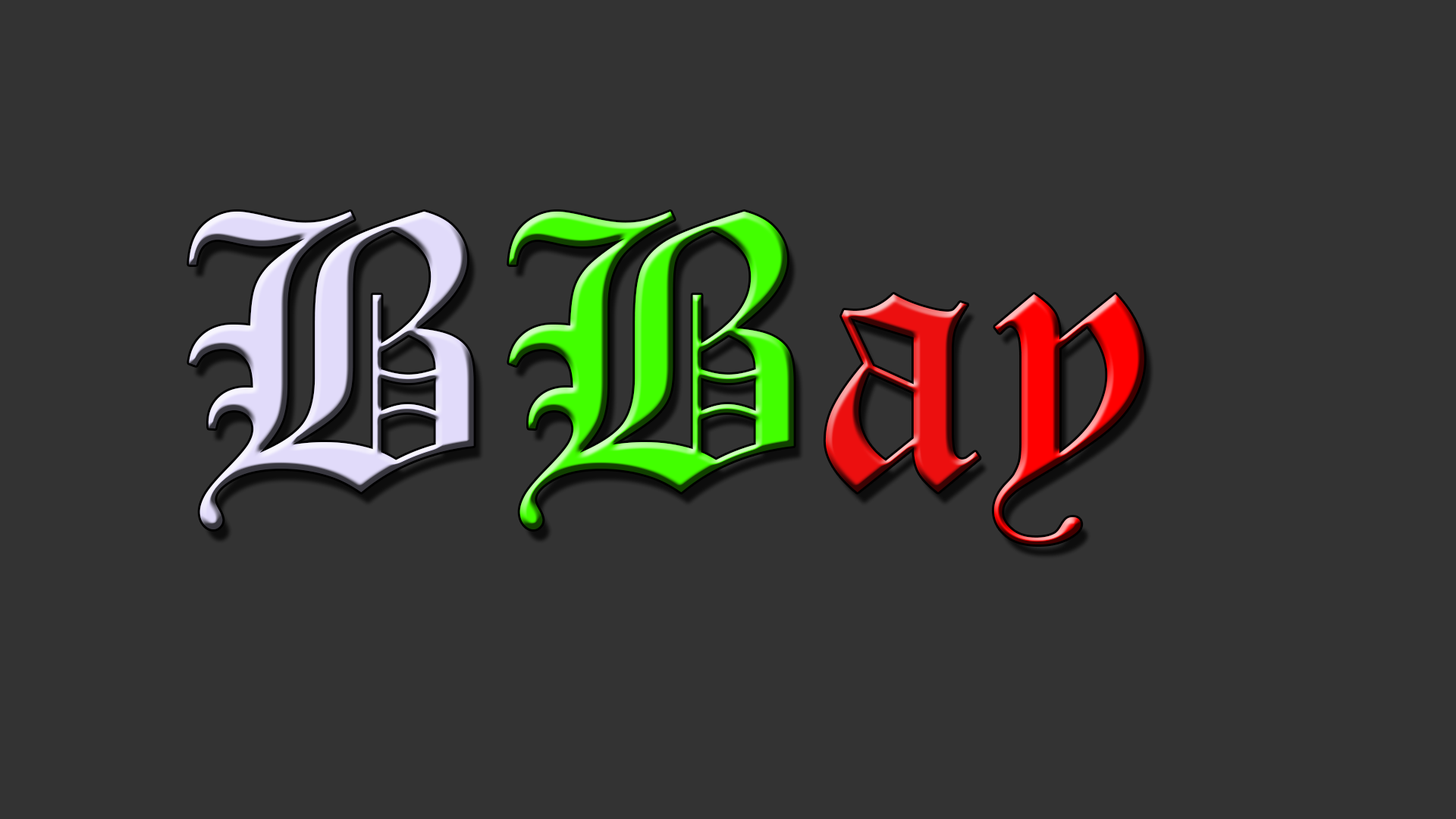
<style>
.page{position:relative;width:1456px;height:819px;background:#333333}
.page>*{position:absolute;margin:0}
.t1{font:379.2px "OldEnglishTextMT"}
</style>
<div class="page">
<p class="t1" style="left:189px;top:211px;width:955px;height:333px">BBay</p>
</div>
